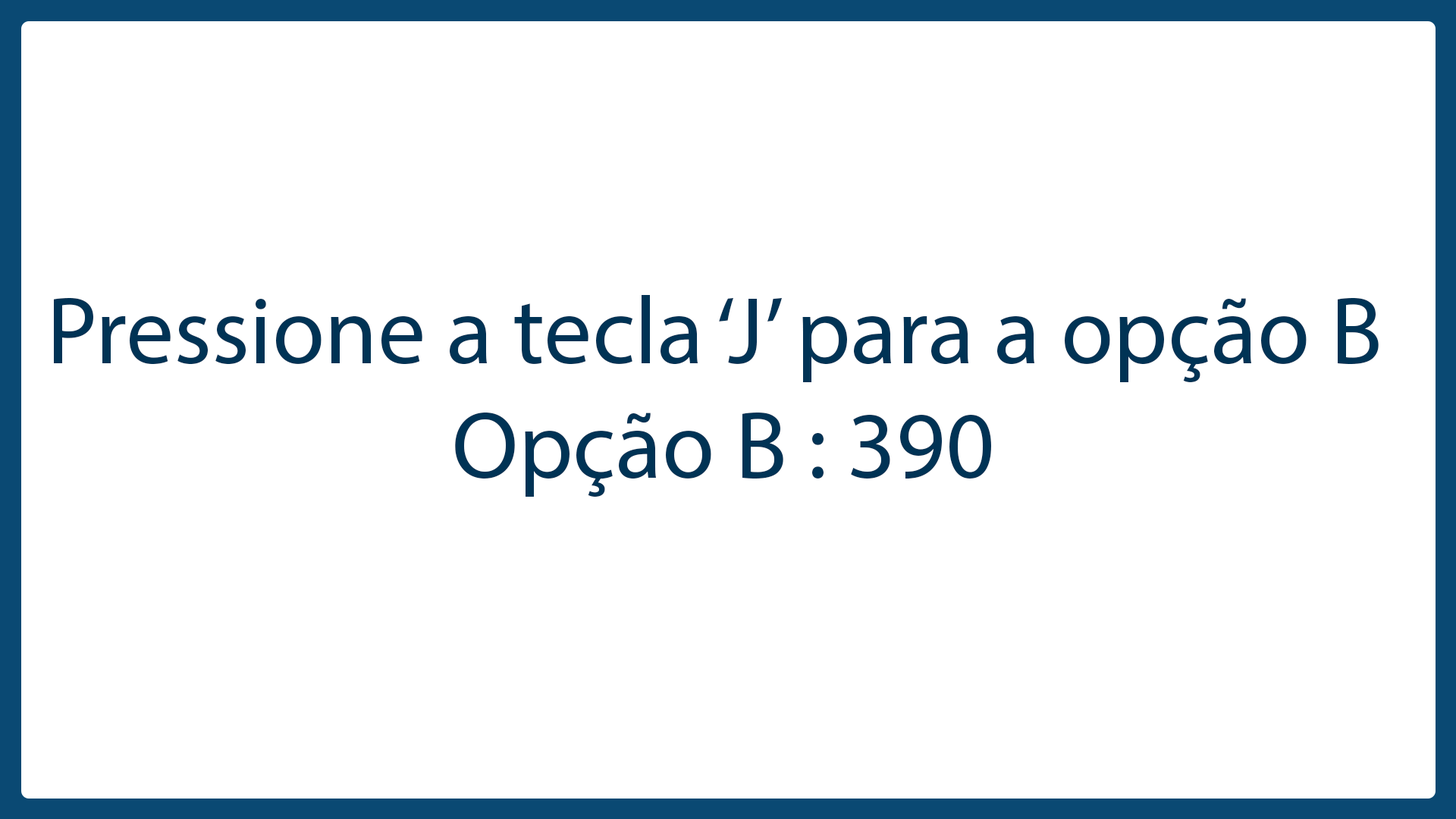
<style>
.page{position:relative;width:1456px;height:819px;background:#ffffff}
.page>*{position:absolute;margin:0}
.t1{font:95.9px "MyriadPro-Regular";color:#003355}
</style>
<div class="page">
<p class="t1" style="left:54px;top:295px;width:1325px;height:202px">Pressione a tecla ‘J’ para a opção B<br>                    Opção B : 390</p>
</div>
